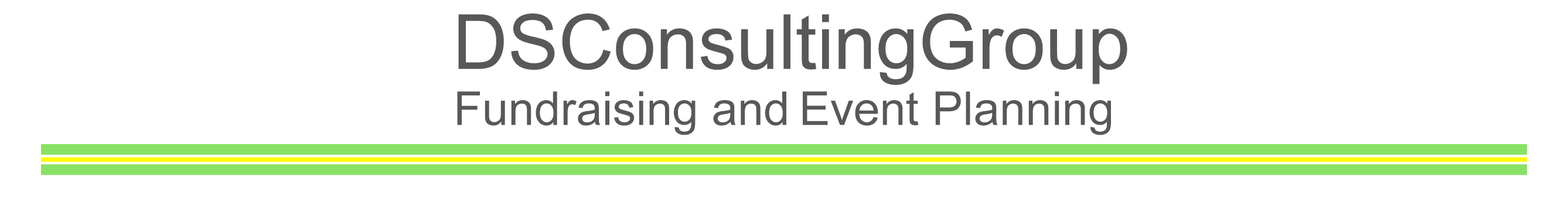
<style>
.page{position:relative;width:1568px;height:209px;background:#ffffff}
.page>*{position:absolute;margin:0}
.t1{font:46.9px "ArialMT";color:#585858}
.t2{font:76.2px "ArialMT";color:#585858}
</style>
<div class="page">
<p class="t1" style="left:457px;top:13px;width:670px;height:122px;text-align:center"><span class="t2">DSConsultingGroup<br></span>Fundraising and Event Planning</p>
</div>
